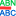
<style>
.page{position:relative;width:16px;height:16px}
.page>*{position:absolute;margin:0}
.t1{font:8px "ArialMT";color:#00c144}
.t2{font:8px "ArialMT";color:#0060cb}
</style>
<div class="page">
<p class="t1" style="left:0px;top:0px;width:16px;height:6px">ABN</p>
<p class="t2" style="left:0px;top:9px;width:16px;height:7px">ABC</p>
</div>
